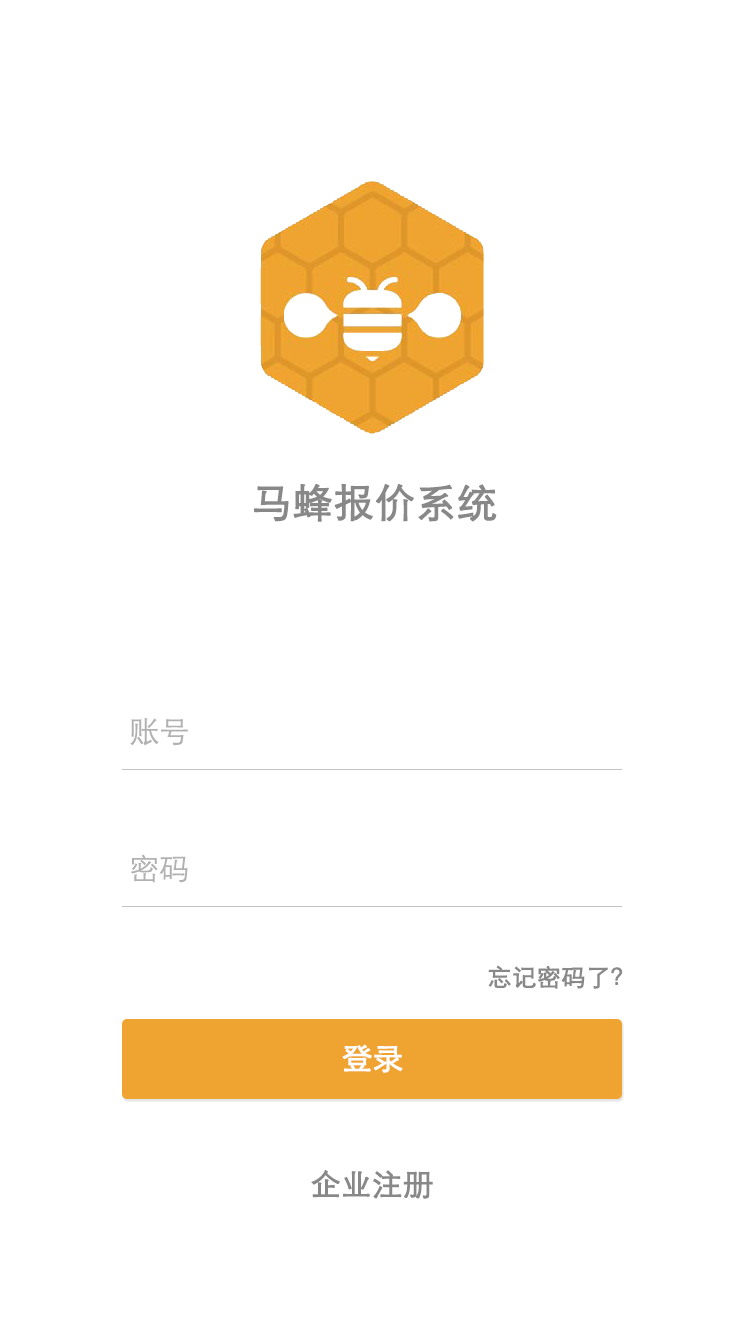
<style>
.page{position:relative;width:750px;height:1334px;background:#ffffff}
.page>*{position:absolute;margin:0}
.t1{font:40px "STXihei";color:#888888;font-weight:bold}
.t2{font:30px "STXihei";color:#b1b1b1}
.t3{font:24px "STXihei";color:#888888;font-weight:bold}
.t4{font:30px "STXihei";color:#ffffff;font-weight:bold}
.t5{font:30px "STXihei";color:#888888;font-weight:bold}
</style>
<div class="page">
<p class="t1" style="left:254px;top:483px;width:243px;height:39px">马蜂报价系统</p>
<p class="t2" style="left:130px;top:718px;width:58px;height:28px">账号</p>
<p class="t2" style="left:131px;top:854px;width:57px;height:29px">密码</p>
<p class="t3" style="left:488px;top:965px;width:135px;height:24px">忘记密码了？</p>
<p class="t4" style="left:342px;top:1044px;width:61px;height:29px">登录</p>
<p class="t5" style="left:311px;top:1170px;width:122px;height:29px">企业注册</p>
</div>
